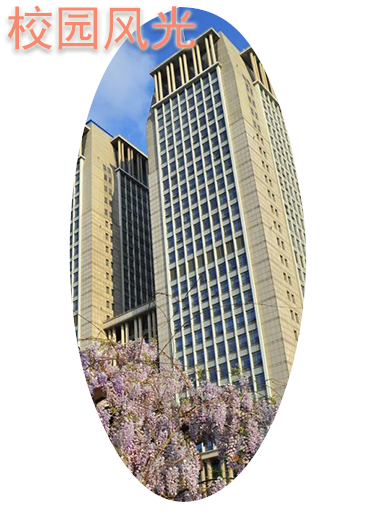
<style>
.page{position:relative;width:380px;height:520px;background:#ffffff}
.page>*{position:absolute;margin:0}
.t1{font:48px "SimHei";color:#f78973}
</style>
<div class="page">
<p class="t1" style="left:7px;top:5px;width:189px;height:45px">校园风光</p>
</div>
